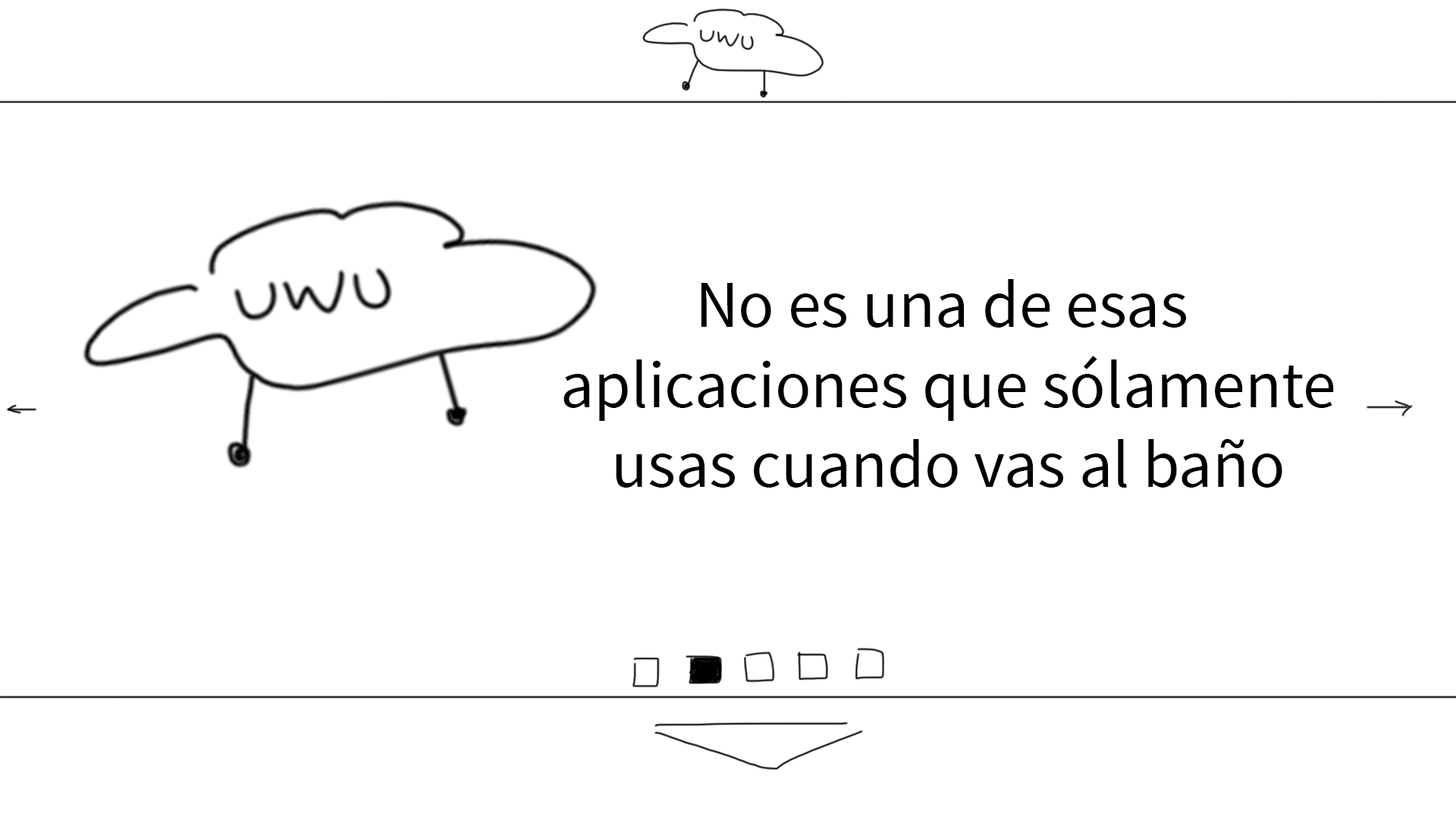
<style>
.page{position:relative;width:1456px;height:819px;background:#ffffff}
.page>*{position:absolute;margin:0}
.t1{font:66.7px "SourceSansPro-Regular";color:#000000}
</style>
<div class="page">
<p class="t1" style="left:563px;top:279px;width:771px;height:209px;text-align:center">No es una de esas <br>aplicaciones que sólamente<br>usas cuando vas al baño</p>
</div>
